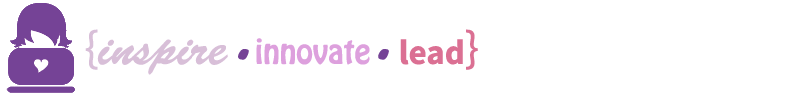
<style>
.page{position:relative;width:800px;height:100px;background:#ffffff}
.page>*{position:absolute;margin:0}
.t1{font:30px "HoboStd";color:#dda0dd}
.t2{font:50px "MyriadPro-Regular";color:#d8bfd8}
.t3{font:50px "BrushScriptStd";color:#d8bfd8}
.t4{font:35px "SourceSansPro-Bold";color:#db7093}
.t5{font:50px "MyriadPro-Regular";color:#db7093}
.t6{font:70px "BrushScriptStd";color:#754396}
</style>
<div class="page">
<p class="t1" style="left:85px;top:29px;width:393px;height:46px"><span class="t2">{</span><span class="t3">inspire  </span>innovate  <span class="t4">lead</span><span class="t5">}</span></p>
<p class="t6" style="left:238px;top:49px;width:151px;height:11px">.     .</p>
</div>
